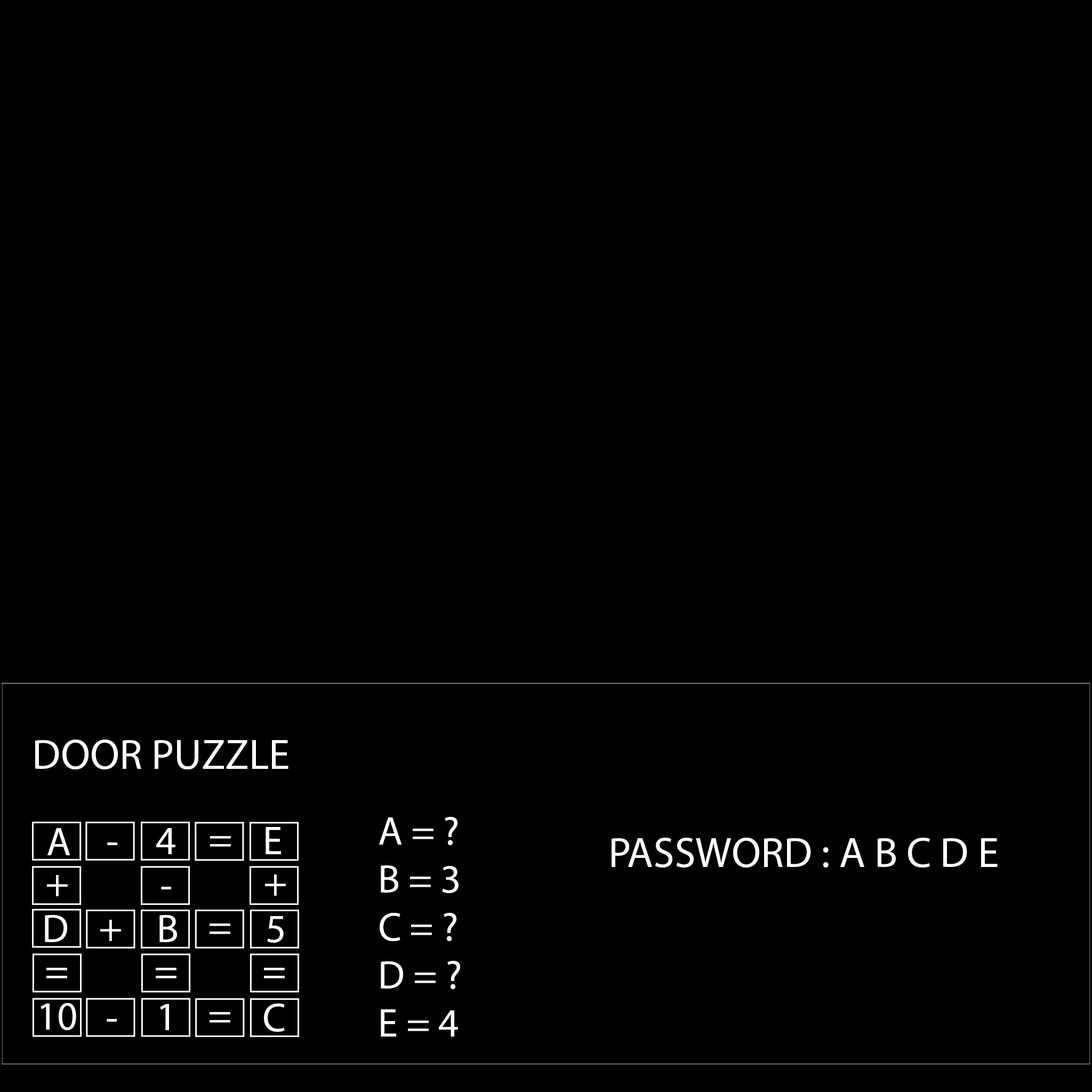
<style>
.page{position:relative;width:1092px;height:1092px;background:#000000}
.page>*{position:absolute;margin:0}
.t1{font:42.7px "MyriadPro-Regular";color:#ffffff}
.t2{font:40px "MyriadPro-Regular";color:#ffffff}
</style>
<div class="page">
<p class="t1" style="left:35px;top:740px;width:253px;height:29px">DOOR PUZZLE</p>
<p class="t2" style="left:379px;top:817px;width:81px;height:220px">A = ?<br>B = 3<br>C = ?<br>D = ?<br>E = 4</p>
<p class="t2" style="left:47px;top:828px;width:23px;height:27px">A</p>
<p class="t2" style="left:156px;top:828px;width:19px;height:26px">4</p>
<p class="t2" style="left:266px;top:827px;width:15px;height:27px">E</p>
<p class="t2" style="left:107px;top:842px;width:10px;height:3px">-</p>
<p class="t2" style="left:210px;top:836px;width:21px;height:11px">=</p>
<p class="t1" style="left:612px;top:838px;width:386px;height:30px">PASSWORD : A B C D E</p>
<p class="t2" style="left:47px;top:875px;width:21px;height:21px">+</p>
<p class="t2" style="left:265px;top:874px;width:21px;height:22px">+</p>
<p class="t2" style="left:161px;top:887px;width:10px;height:2px">-</p>
<p class="t2" style="left:45px;top:915px;width:22px;height:27px">D</p>
<p class="t2" style="left:159px;top:915px;width:18px;height:27px">B</p>
<p class="t2" style="left:267px;top:916px;width:17px;height:27px">5</p>
<p class="t2" style="left:100px;top:920px;width:21px;height:21px">+</p>
<p class="t2" style="left:210px;top:923px;width:20px;height:11px">=</p>
<p class="t2" style="left:46px;top:968px;width:21px;height:10px">=</p>
<p class="t2" style="left:156px;top:968px;width:20px;height:10px">=</p>
<p class="t2" style="left:264px;top:968px;width:21px;height:10px">=</p>
<p class="t2" style="left:41px;top:1003px;width:35px;height:27px">10</p>
<p class="t2" style="left:160px;top:1004px;width:9px;height:26px">1</p>
<p class="t2" style="left:210px;top:1012px;width:20px;height:11px">=</p>
<p class="t2" style="left:264px;top:1003px;width:21px;height:29px">C</p>
<p class="t2" style="left:107px;top:1019px;width:10px;height:3px">-</p>
</div>
